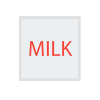
<style>
.page{position:relative;width:100px;height:100px;background:#ffffff}
.page>*{position:absolute;margin:0}
.t1{font:22.4px "MyriadPro-Regular";color:#f44336;scale:0.95 1}
</style>
<div class="page">
<p class="t1" style="left:29px;top:41px;width:44px;height:15px">MILK</p>
</div>
